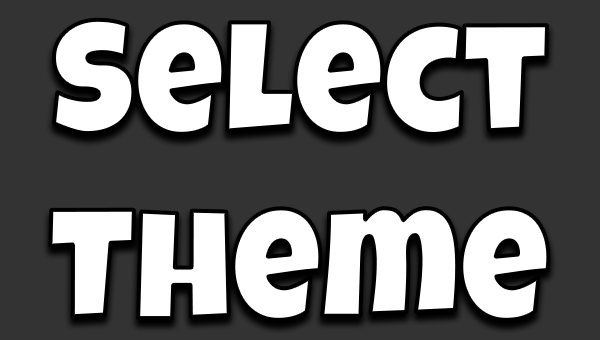
<style>
.page{position:relative;width:600px;height:340px;background:#333333}
.page>*{position:absolute;margin:0}
.t1{font:155.3px "LuckiestGuy-Regular";color:#ffffff}
</style>
<div class="page">
<p class="t1" style="left:50px;top:19px;width:499px;height:301px;text-align:center">Select<br>Theme</p>
</div>
